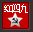
<style>
.page{position:relative;width:33px;height:32px;background:#c50000}
.page>*{position:absolute;margin:0}
.t1{font:10.4px "SimSun";letter-spacing:-0.25em;color:#ffffff}
</style>
<div class="page">
<p class="t1" style="left:4px;top:4px;width:24px;height:9px">红四九</p>
</div>
